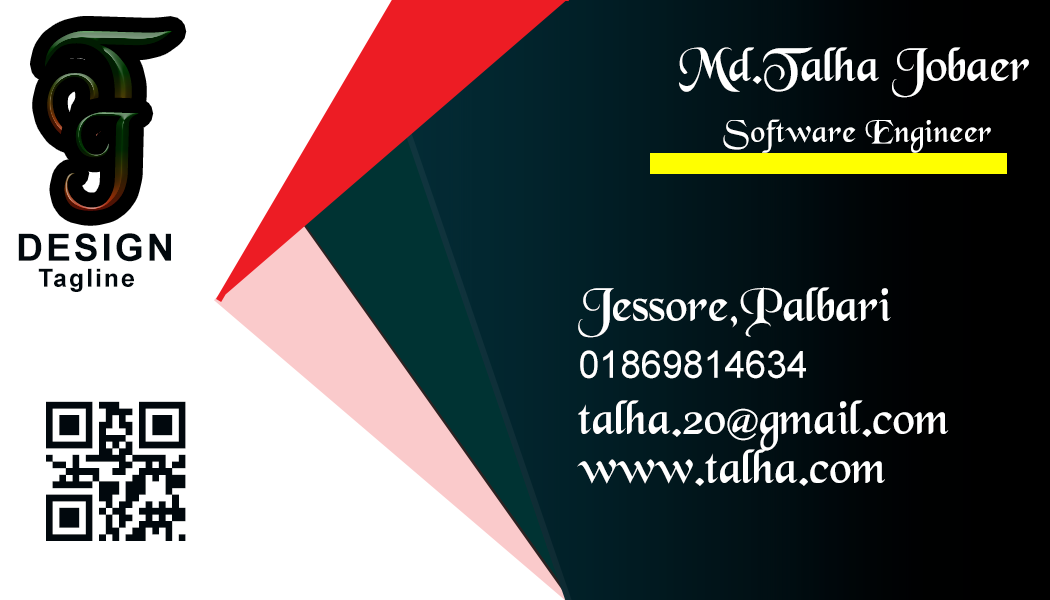
<style>
.page{position:relative;width:1050px;height:600px;background:#ffffff}
.page>*{position:absolute;margin:0}
.t1{font:50px "BlackChancery";color:#ffffff}
.t2{font:33.3px "BlackChancery";letter-spacing:0.02em;color:#ffffff}
.t3{font:37.5px "Arial-BoldMT";letter-spacing:0.075em;color:#01080d}
.t4{font:25px "Arial-BoldMT";letter-spacing:0.075em;color:#01080d}
.t5{font:37.5px "ArialMT";color:#ffffff}
.t6{font:139.1px "AlphanumericQR";letter-spacing:0.075em;color:#01080d}
</style>
<div class="page">
<p class="t1" style="left:679px;top:47px;width:350px;height:51px">Md.Talha Jobaer</p>
<p class="t2" style="left:723px;top:119px;width:268px;height:34px">Software Engineer</p>
<p class="t3" style="left:18px;top:233px;width:153px;height:29px">DESIGN</p>
<p class="t4" style="left:38px;top:268px;width:96px;height:24px">Tagline</p>
<p class="t1" style="left:578px;top:287px;width:313px;height:51px">Jessore,Palbari</p>
<p class="t5" style="left:580px;top:350px;width:226px;height:29px">01869814634</p>
<p class="t6" style="left:46px;top:401px;width:140px;height:140px">s</p>
<p class="t1" style="left:578px;top:400px;width:371px;height:51px">talha.20@gmail.com</p>
<p class="t1" style="left:577px;top:449px;width:308px;height:37px">www.talha.com</p>
</div>
